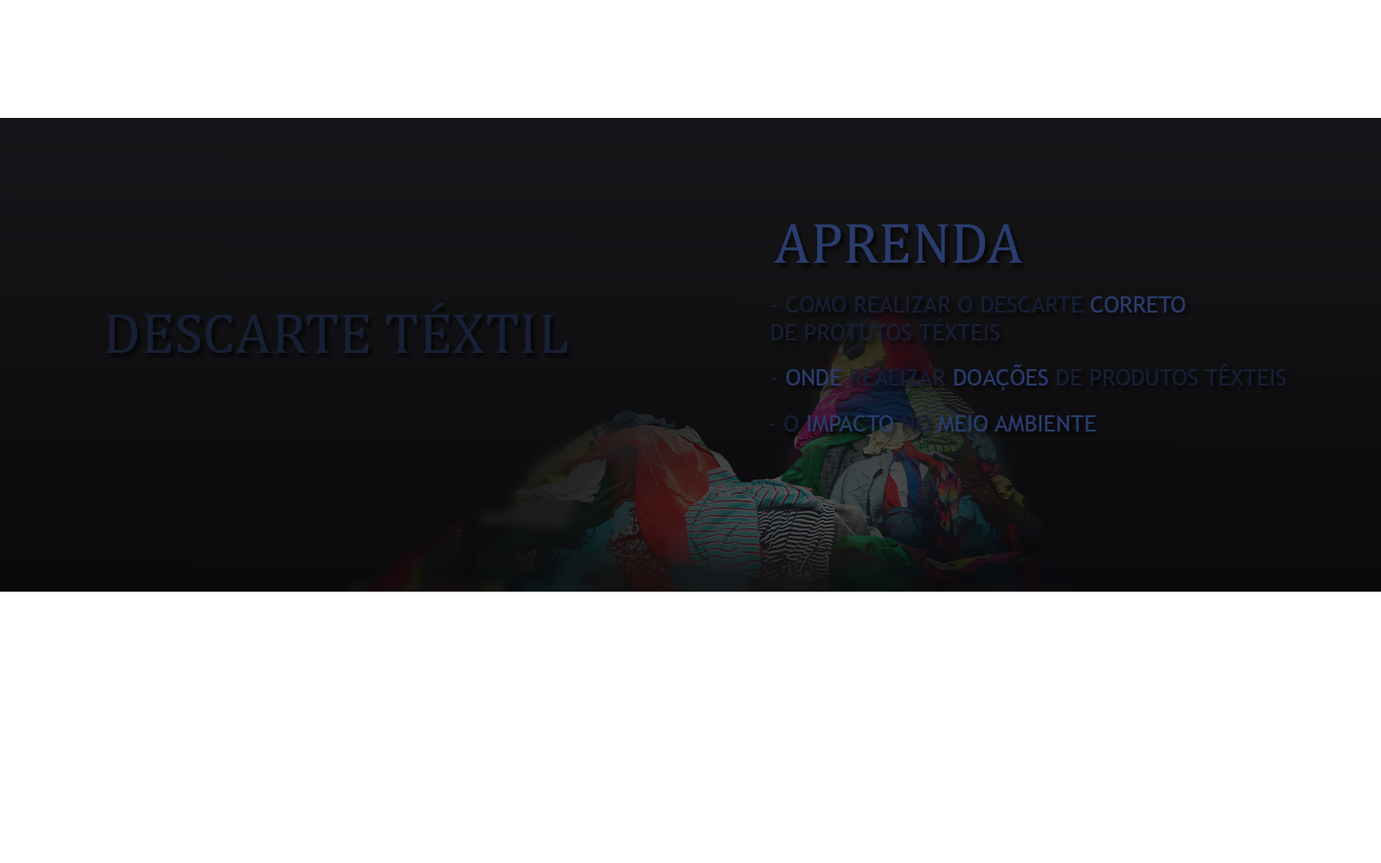
<style>
.page{position:relative;width:1381px;height:863px;background:#ffffff}
.page>*{position:absolute;margin:0}
.t1{font:57.6px "Cambria";color:#2a3c6c}
.t2{font:57.6px "Cambria";color:#171f35}
.t3{font:23px "TrebuchetMS";color:#171f35}
.t4{font:23px "TrebuchetMS";color:#2a3c6c}
</style>
<div class="page">
<p class="t1" style="left:774px;top:224px;width:249px;height:39px">APRENDA</p>
<p class="t2" style="left:106px;top:303px;width:462px;height:50px">DESCARTE TÉXTIL</p>
<p class="t3" style="left:771px;top:296px;width:415px;height:45px">- COMO REALIZAR O DESCARTE <span class="t4">CORRETO<br></span>DE PROTUTOS TÉXTEIS</p>
<p class="t3" style="left:771px;top:364px;width:515px;height:26px">- <span class="t4">ONDE </span>REALIZAR <span class="t4">DOAÇÕES</span> DE PRODUTOS TÊXTEIS</p>
<p class="t4" style="left:769px;top:415px;width:327px;height:17px"><span class="t3">- O </span>IMPACTO <span class="t3">NO </span>MEIO AMBIENTE</p>
</div>
